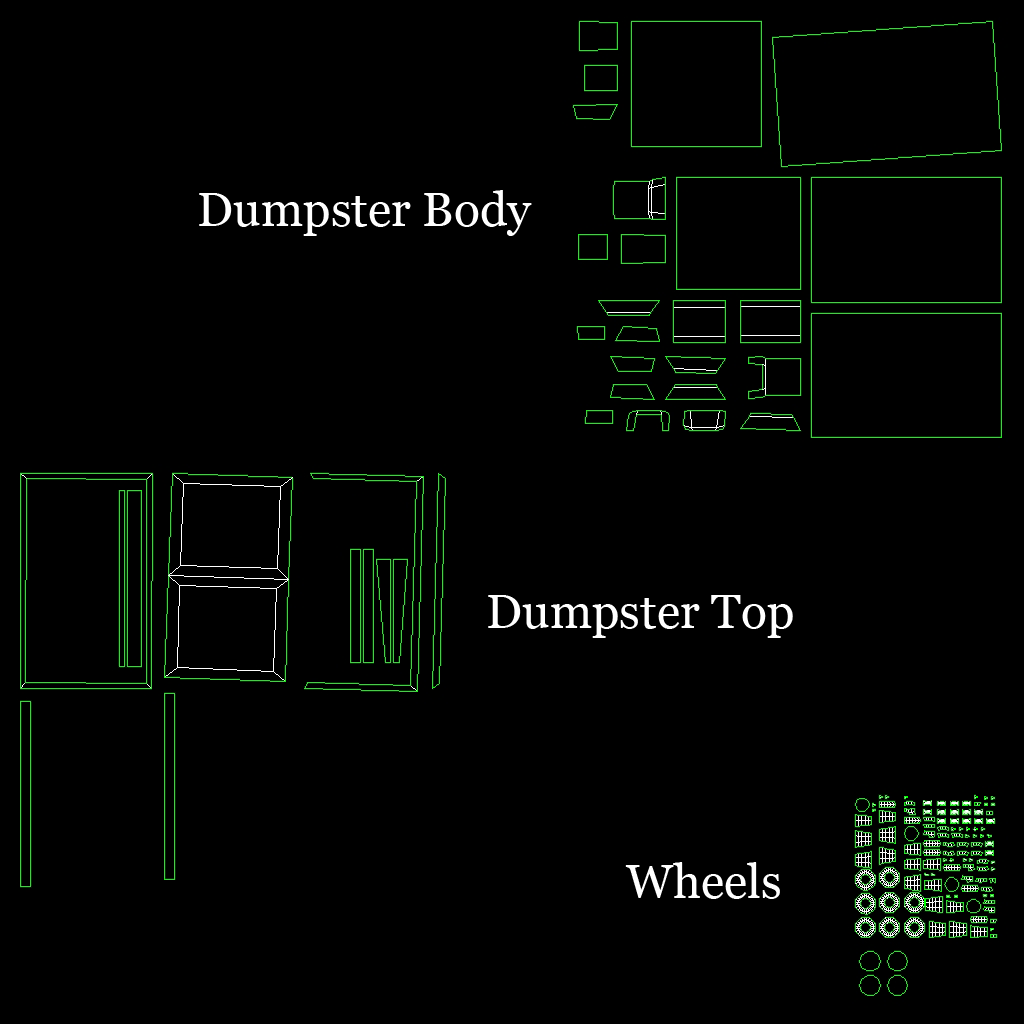
<style>
.page{position:relative;width:1024px;height:1024px;background:#000000}
.page>*{position:absolute;margin:0}
.t1{font:48px "Georgia";color:#ffffff}
</style>
<div class="page">
<p class="t1" style="left:199px;top:190px;width:333px;height:46px">Dumpster Body</p>
<p class="t1" style="left:488px;top:595px;width:305px;height:43px">Dumpster Top</p>
<p class="t1" style="left:625px;top:862px;width:155px;height:37px">Wheels</p>
</div>
